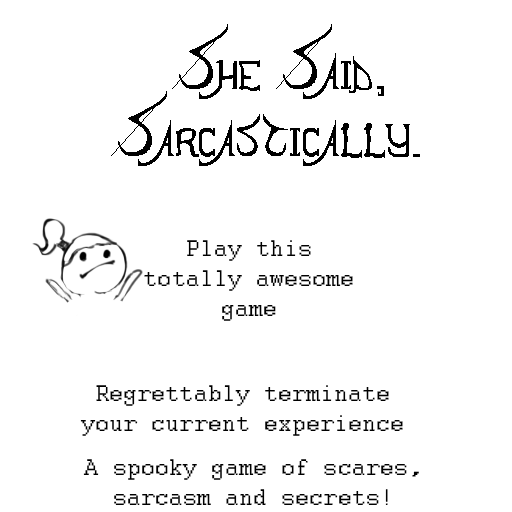
<style>
.page{position:relative;width:512px;height:512px;background:#ffffff}
.page>*{position:absolute;margin:0}
.t1{font:25px "Courier";color:#000000}
</style>
<div class="page">
<p class="t1" style="left:144px;top:240px;width:209px;height:81px;text-align:center">Play this<br>totally awesome<br>game</p>
<p class="t1" style="left:80px;top:385px;width:323px;height:51px;text-align:center">Regrettably terminate<br>your current experience</p>
<p class="t1" style="left:83px;top:459px;width:336px;height:46px;text-align:center">A spooky game of scares,<br>sarcasm and secrets!</p>
</div>
